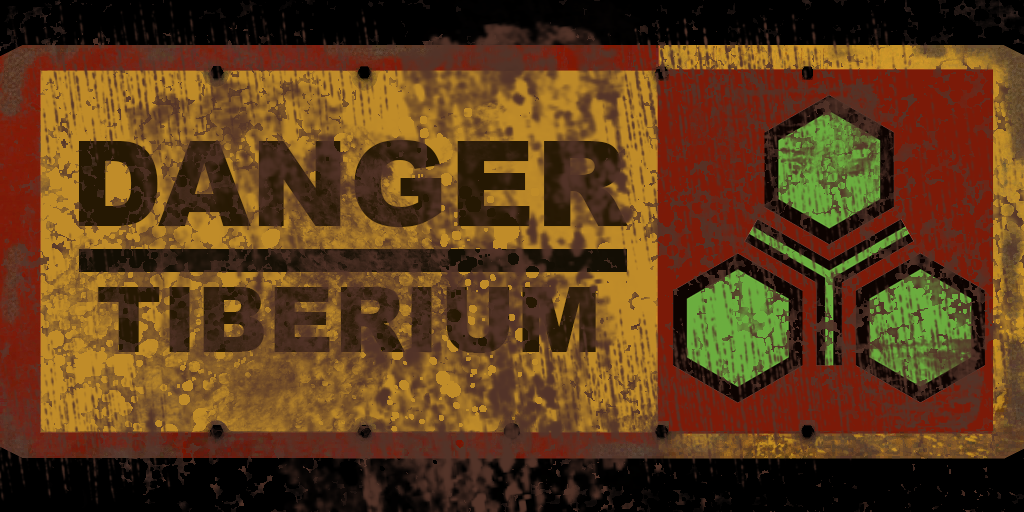
<style>
.page{position:relative;width:1024px;height:512px}
.page>*{position:absolute;margin:0}
.t1{font:119px "Arial-Black";color:#34210f}
.t2{font:91px "Arial-Black";color:#3e2718}
</style>
<div class="page">
<p class="t1" style="left:79px;top:140px;width:549px;height:87px">DANGER</p>
<p class="t2" style="left:98px;top:287px;width:498px;height:66px">TIBERIUM</p>
</div>
